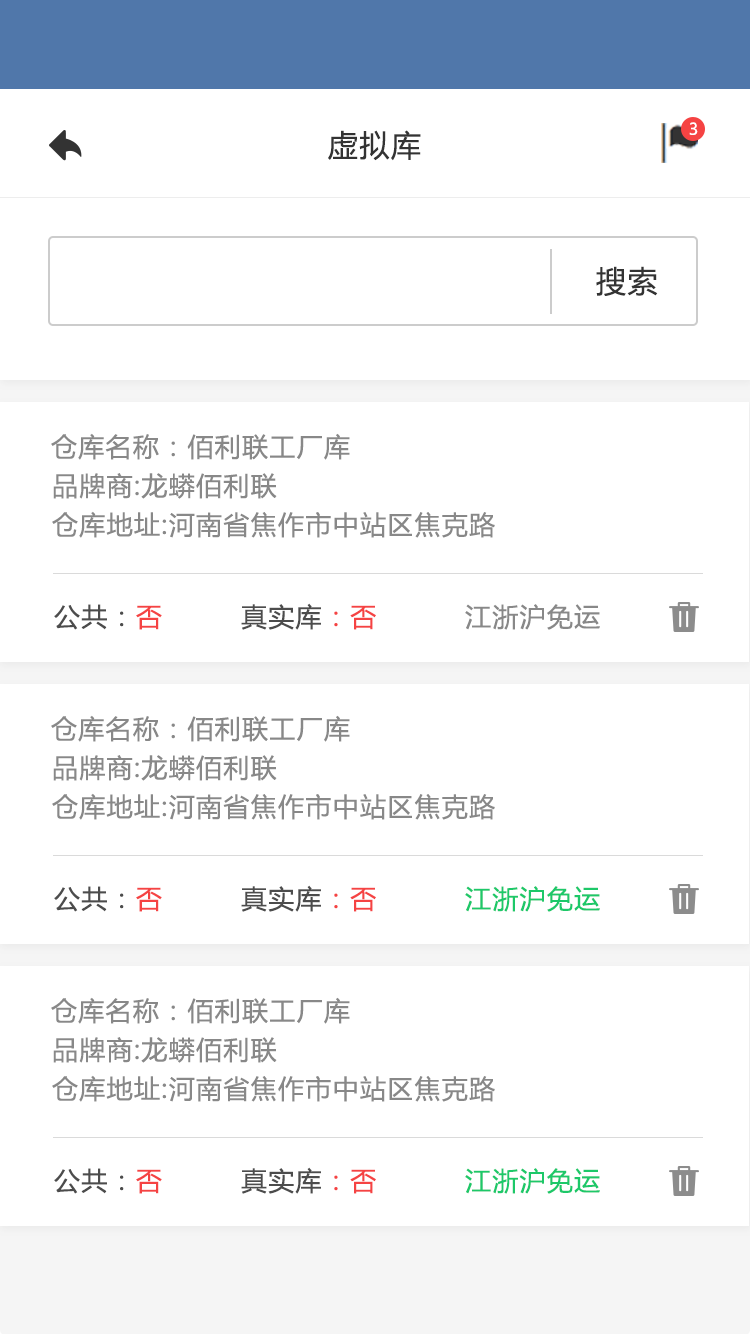
<style>
.page{position:relative;width:750px;height:1334px;background:#ffffff}
.page>*{position:absolute;margin:0}
.t1{font:16px "MicrosoftYaHeiUI";color:#ffffff}
.t2{font:30px "MicrosoftYaHeiUI";letter-spacing:0.05em;color:#333333}
.t3{font:26px "MicrosoftYaHeiUI";letter-spacing:0.05em;color:#888888}
.t4{font:26px "MicrosoftYaHeiUI";letter-spacing:0.05em;color:#4c4c4c}
.t5{font:26px "MicrosoftYaHeiUI";letter-spacing:0.05em;color:#f54343}
.t6{font:26px "MicrosoftYaHeiUI";letter-spacing:0.05em;color:#1dc869}
</style>
<div class="page">
<p class="t1" style="left:689px;top:122px;width:9px;height:13px">3</p>
<p class="t2" style="left:328px;top:130px;width:93px;height:31px">虚拟库</p>
<p class="t2" style="left:596px;top:266px;width:62px;height:30px">搜索</p>
<p class="t3" style="left:51px;top:433px;width:299px;height:27px">仓库名称：佰利联工厂库</p>
<p class="t3" style="left:53px;top:473px;width:224px;height:26px">品牌商:龙蟒佰利联</p>
<p class="t3" style="left:52px;top:511px;width:443px;height:27px">仓库地址:河南省焦作市中站区焦克路</p>
<p class="t4" style="left:54px;top:604px;width:108px;height:26px">公共：<span class="t5">否</span></p>
<p class="t4" style="left:241px;top:603px;width:135px;height:27px">真实库<span class="t5">：否</span></p>
<p class="t3" style="left:465px;top:604px;width:135px;height:26px">江浙沪免运</p>
<p class="t3" style="left:51px;top:715px;width:299px;height:27px">仓库名称：佰利联工厂库</p>
<p class="t3" style="left:53px;top:755px;width:224px;height:26px">品牌商:龙蟒佰利联</p>
<p class="t3" style="left:52px;top:793px;width:443px;height:27px">仓库地址:河南省焦作市中站区焦克路</p>
<p class="t4" style="left:54px;top:886px;width:108px;height:26px">公共：<span class="t5">否</span></p>
<p class="t4" style="left:241px;top:885px;width:135px;height:27px">真实库<span class="t5">：否</span></p>
<p class="t6" style="left:465px;top:886px;width:135px;height:26px">江浙沪免运</p>
<p class="t3" style="left:51px;top:997px;width:299px;height:27px">仓库名称：佰利联工厂库</p>
<p class="t3" style="left:53px;top:1037px;width:224px;height:26px">品牌商:龙蟒佰利联</p>
<p class="t3" style="left:52px;top:1075px;width:443px;height:27px">仓库地址:河南省焦作市中站区焦克路</p>
<p class="t4" style="left:54px;top:1168px;width:108px;height:26px">公共：<span class="t5">否</span></p>
<p class="t4" style="left:241px;top:1167px;width:135px;height:27px">真实库<span class="t5">：否</span></p>
<p class="t6" style="left:465px;top:1168px;width:135px;height:26px">江浙沪免运</p>
</div>
